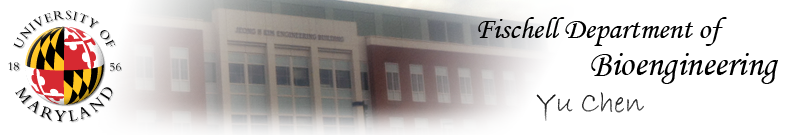
<style>
.page{position:relative;width:800px;height:135px;background:#ffffff}
.page>*{position:absolute;margin:0}
.t1{font:30px "MonotypeCorsiva";color:#000000}
.t2{font:36px "MonotypeCorsiva";color:#000000}
.t3{font:30px "BradleyHandITC"}
</style>
<div class="page">
<p class="t1" style="left:478px;top:17px;width:249px;height:29px">Fischell Department of</p>
<p class="t2" style="left:591px;top:53px;width:187px;height:31px">Bioengineering</p>
<p class="t3" style="left:536px;top:92px;width:108px;height:29px">Yu Chen</p>
</div>
